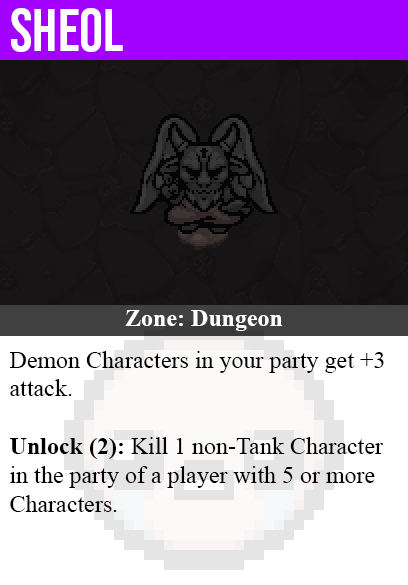
<style>
.page{position:relative;width:408px;height:585px;background:#ffffff}
.page>*{position:absolute;margin:0}
.t1{font:60px "BebasNeue-Regular";color:#ffffff}
.t2{font:24px "TimesNewRomanPS-BoldMT";color:#ffffff}
.t3{font:24px "TimesNewRomanPSMT";color:#000000}
.t4{font:24px "TimesNewRomanPS-BoldMT";color:#000000}
</style>
<div class="page">
<p class="t1" style="left:11px;top:8px;width:112px;height:44px">sheol</p>
<p class="t2" style="left:125px;top:310px;width:158px;height:21px">Zone: Dungeon</p>
<p class="t3" style="left:9px;top:351px;width:375px;height:161px">Demon Characters in your party get +3<br>attack.<br><br><span class="t4">Unlock (2):</span> Kill 1 non-Tank Character<br>in the party of a player with 5 or more<br>Characters.</p>
</div>
